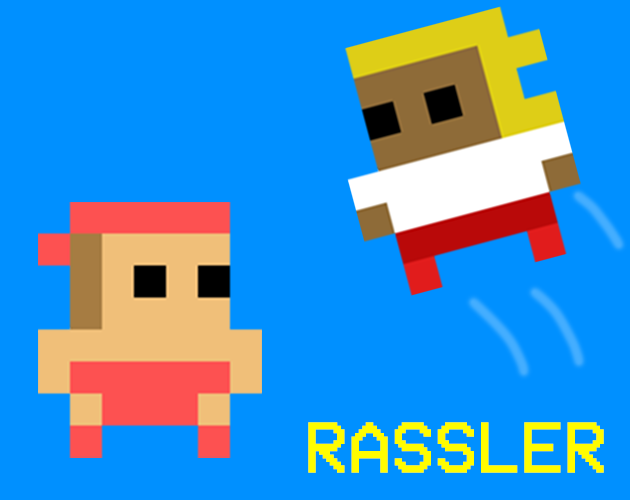
<style>
.page{position:relative;width:630px;height:500px;background:#0090ff}
.page>*{position:absolute;margin:0}
.t1{font:72px "Camcorder-Regular";color:#fffc00}
</style>
<div class="page">
<p class="t1" style="left:308px;top:422px;width:296px;height:51px">RASSLER</p>
</div>
